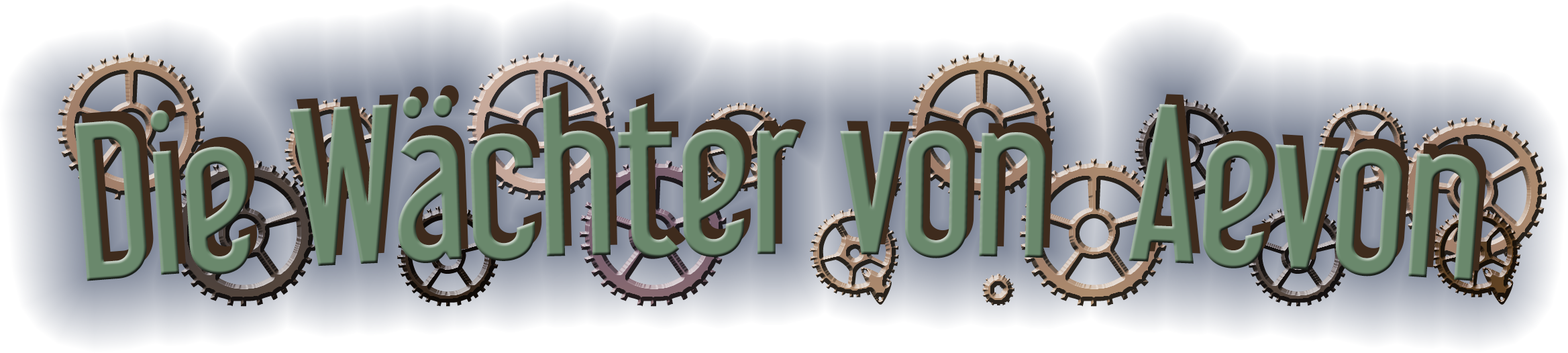
<style>
.page{position:relative;width:1568px;height:353px}
.page>*{position:absolute;margin:0}
.t1{font:201.3px "TimetogetaWatch"}
.t2{font:201.3px "LibelSuit-Regular"}
</style>
<div class="page">
<p class="t1" style="left:57px;top:52px;width:1351px;height:149px">O o O q .O o q .</p>
<p class="t2" style="left:81px;top:81px;width:1406px;height:190px">Die Wächter von  Aevon</p>
<p class="t1" style="left:1399px;top:117px;width:148px;height:147px;rotate:60deg">O</p>
<p class="t1" style="left:170px;top:158px;width:1351px;height:149px">O o O q .O o q</p>
</div>
